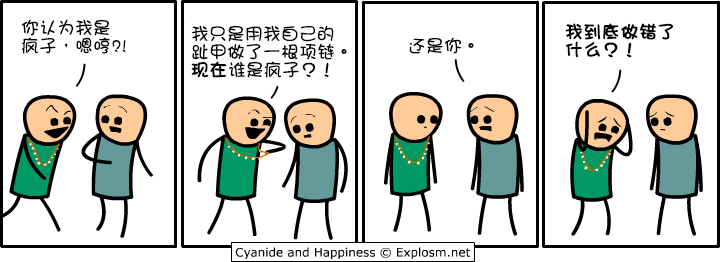
<style>
.page{position:relative;width:721px;height:262px;background:#ffffff}
.page>*{position:absolute;margin:0}
.t1{font:18px/18px "DFGirl";color:#000000}
.t2{font:18px/18px "DFGirl";color:#000000;font-weight:bold}
.t3{font:18px "DFGirl";color:#000000}
</style>
<div class="page">
<p class="t1" style="left:21px;top:19px;width:105px;height:35px">你认为我是<br>疯子，嗯哼?!</p>
<p class="t1" style="left:191px;top:25px;width:156px;height:53px">我只是用我自己的<br>趾甲做了一根项链。<br><span class="t2">现在</span>谁是疯子？！</p>
<p class="t2" style="left:565px;top:23px;width:109px;height:35px">我到底做错了<br>什么？！</p>
<p class="t3" style="left:409px;top:37px;width:65px;height:17px">还是你。</p>
</div>
